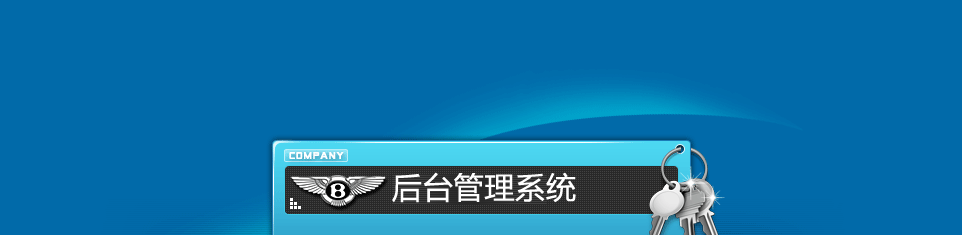
<style>
.page{position:relative;width:962px;height:235px;background:#016aa9}
.page>*{position:absolute;margin:0}
.t1{font:30px "MicrosoftYaHei";color:#ffffff;font-weight:bold}
</style>
<div class="page">
<p class="t1" style="left:392px;top:172px;width:184px;height:31px">后台管理系统</p>
</div>
